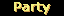
<style>
.page{position:relative;width:64px;height:16px;background:#000000}
.page>*{position:absolute;margin:0}
.t1{font:13px "Meiryo";color:#f0f080;font-weight:bold}
</style>
<div class="page">
<p class="t1" style="left:14px;top:2px;width:36px;height:12px">Party</p>
</div>
